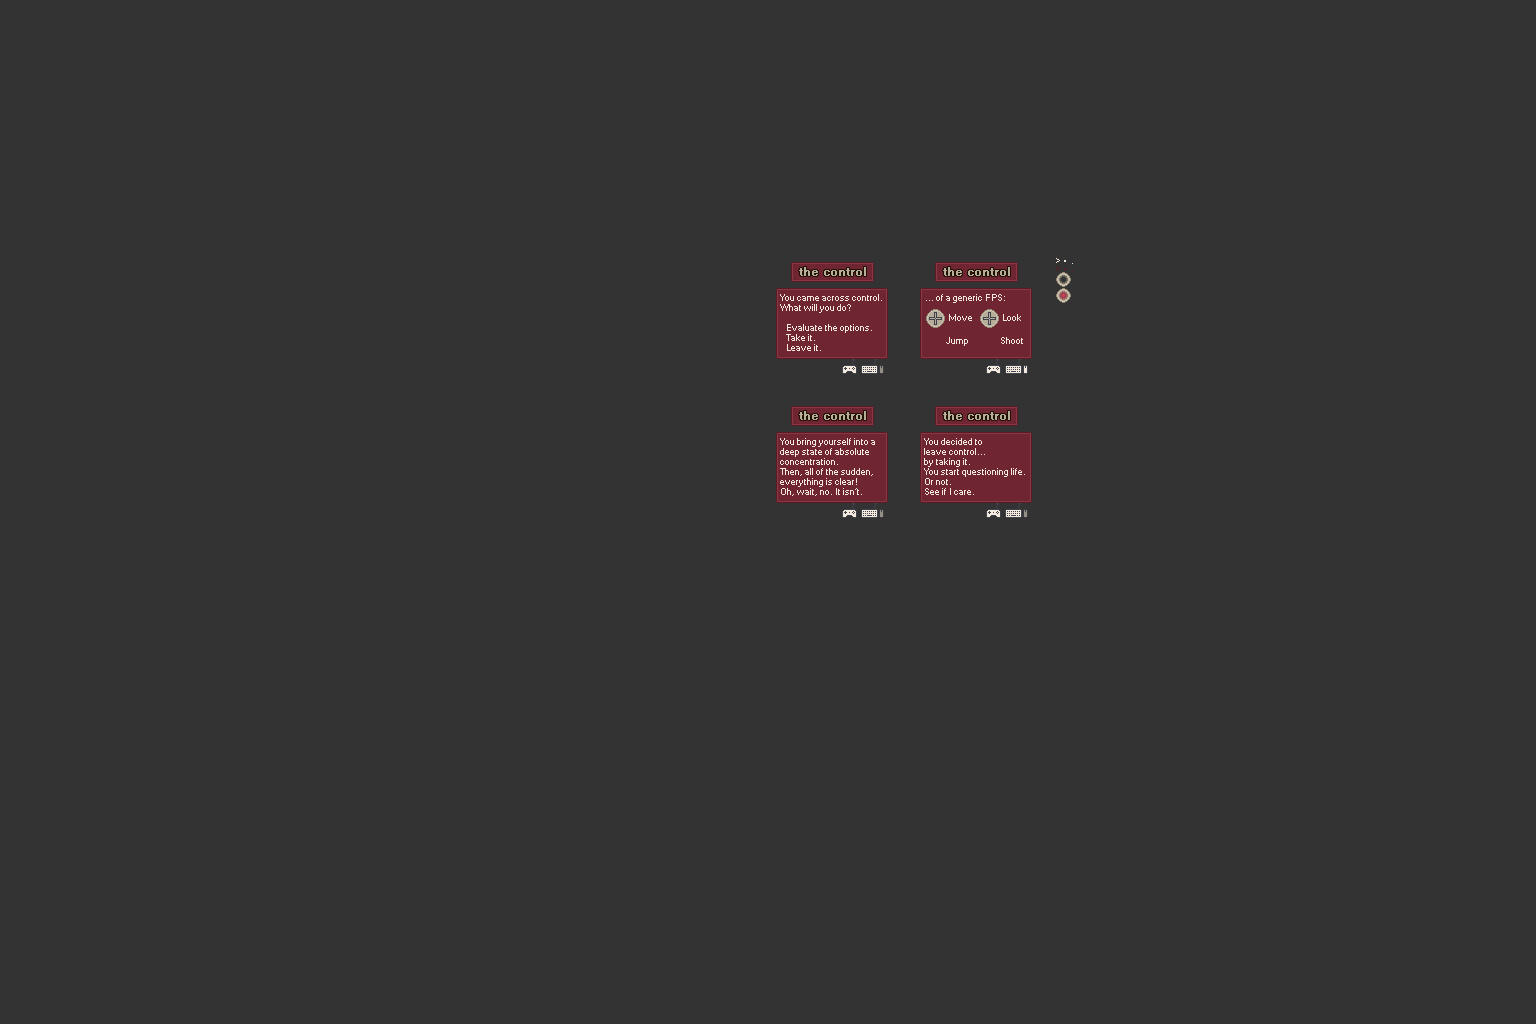
<style>
.page{position:relative;width:1536px;height:1024px;background:#333333}
.page>*{position:absolute;margin:0}
.t1{font:12px "MicrosoftSansSerif";color:#b7ad99;font-weight:bold}
.t2{font:9px "MicrosoftSansSerif";color:#5a1923}
.t3{font:9px "MicrosoftSansSerif";color:#f3e9dc}
.t4{font:9px/10px "MicrosoftSansSerif";color:#f3e9dc}
</style>
<div class="page">
<p class="t1" style="left:799px;top:267px;width:67px;height:9px">the control</p>
<p class="t1" style="left:943px;top:267px;width:67px;height:9px">the control</p>
<p class="t2" style="left:1056px;top:266px;width:17px;height:6px">&gt; •  .</p>
<p class="t3" style="left:1056px;top:258px;width:17px;height:6px">&gt; •  .</p>
<p class="t4" style="left:780px;top:294px;width:102px;height:57px">You came across control.<br>What will you do?<br><br>   Evaluate the options.<br>   Take it.<br>   Leave it.</p>
<p class="t3" style="left:926px;top:294px;width:79px;height:9px">... of a generic FPS:</p>
<p class="t3" style="left:949px;top:314px;width:23px;height:7px">Move</p>
<p class="t3" style="left:1003px;top:314px;width:18px;height:7px">Look</p>
<p class="t3" style="left:946px;top:337px;width:22px;height:9px">Jump</p>
<p class="t3" style="left:1001px;top:337px;width:22px;height:7px">Shoot</p>
<p class="t1" style="left:799px;top:411px;width:67px;height:9px">the control</p>
<p class="t1" style="left:943px;top:411px;width:67px;height:9px">the control</p>
<p class="t4" style="left:780px;top:438px;width:95px;height:58px">You bring yourself into a<br>deep state of absolute <br>concentration.<br>Then, all of the sudden, <br>everything is clear!<br>Oh, wait, no. It isn‘t.</p>
<p class="t4" style="left:924px;top:438px;width:101px;height:57px">You decided to <br>leave control...<br>by taking it.<br>You start questioning life.<br>Or not. <br>See if I care.</p>
</div>
